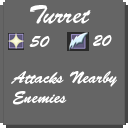
<style>
.page{position:relative;width:128px;height:128px;background:#656565}
.page>*{position:absolute;margin:0}
.t1{font:25px "BrushScriptStd";color:#ffffff}
.t2{font:33.3px "BrushScriptStd";color:#ffffff}
.t3{font:16.7px "BrushScriptStd";color:#ffffff}
</style>
<div class="page">
<p class="t1" style="left:30px;top:5px;width:61px;height:19px"><span class="t2"><br></span>Turret</p>
<p class="t3" style="left:29px;top:36px;width:21px;height:11px">50</p>
<p class="t3" style="left:93px;top:35px;width:19px;height:11px">20</p>
<p class="t3" style="left:11px;top:71px;width:106px;height:34px">Attacks Nearby<br>Enemies</p>
</div>
